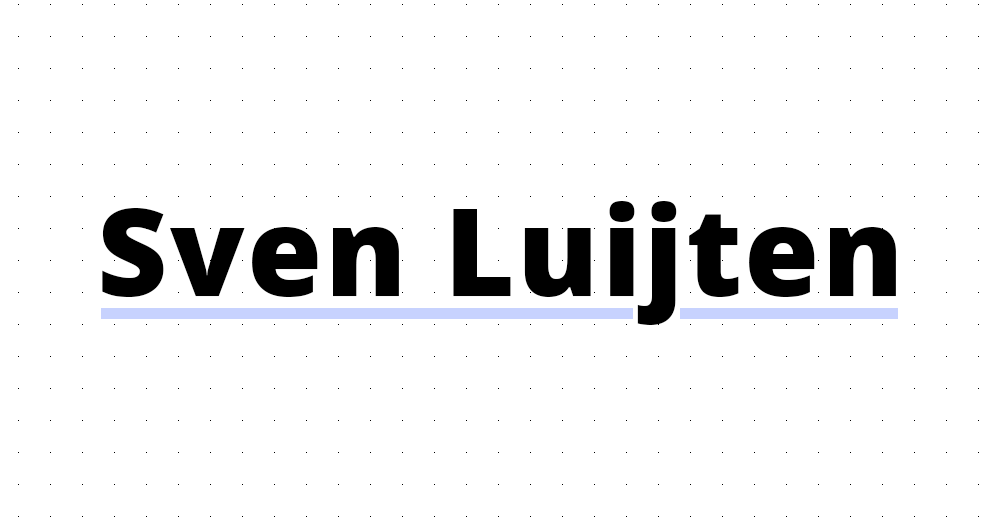
<style>
.page{position:relative;width:1000px;height:525px;background:#ffffff}
.page>*{position:absolute;margin:0}
.t1{font:122.1px "OpenSans-Extrabold";letter-spacing:0.02em;color:#000000}
</style>
<div class="page">
<p class="t1" style="left:102px;top:201px;width:794px;height:124px">Sven Luijten</p>
</div>
